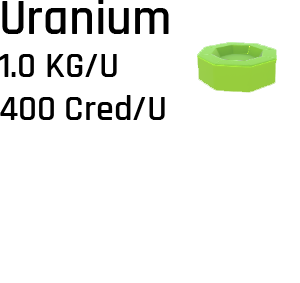
<style>
.page{position:relative;width:300px;height:283px;background:#ffffff}
.page>*{position:absolute;margin:0}
.t1{font:36px "Rajdhani-SemiBold";color:#000000}
.t2{font:50px "Rajdhani-SemiBold";color:#000000}
</style>
<div class="page">
<p class="t1" style="left:0px;top:0px;width:169px;height:120px"><span class="t2">Uranium<br></span>1.0 KG/U<br>400 Cred/U</p>
</div>
